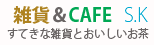
<style>
.page{position:relative;width:154px;height:45px;background:#fffcfc}
.page>*{position:absolute;margin:0}
.t1{font:18.7px "KozGoPr6N-Bold";color:#00a753}
.t2{font:18.7px "KozGoPr6N-Bold";color:#ae821f}
.t3{font:18.7px "KozGoPr6N-Bold";color:#696464}
.t4{font:18.7px "KozGoPr6N-ExtraLight";color:#00a8d0}
.t5{font:11.5px "KozGoPr6N-Regular";color:#696464;scale:0.95 1}
</style>
<div class="page">
<p class="t1" style="left:13px;top:6px;width:135px;height:18px"><span class="t2">雑貨</span><span class="t3">＆</span>CAFE   <span class="t4">S.K</span></p>
<p class="t5" style="left:7px;top:28px;width:142px;height:12px">すてきな雑貨とおいしいお茶</p>
</div>
